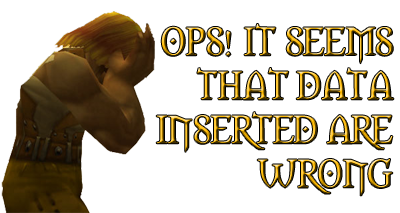
<style>
.page{position:relative;width:400px;height:213px;background:#ffffff}
.page>*{position:absolute;margin:0}
.t1{font:36.7px "Morpheus"}
</style>
<div class="page">
<p class="t1" style="left:156px;top:24px;width:238px;height:172px;text-align:right">OPS! IT SEEMS<br>THAT DATA<br>INSERTED ARE<br>WRONG</p>
</div>
